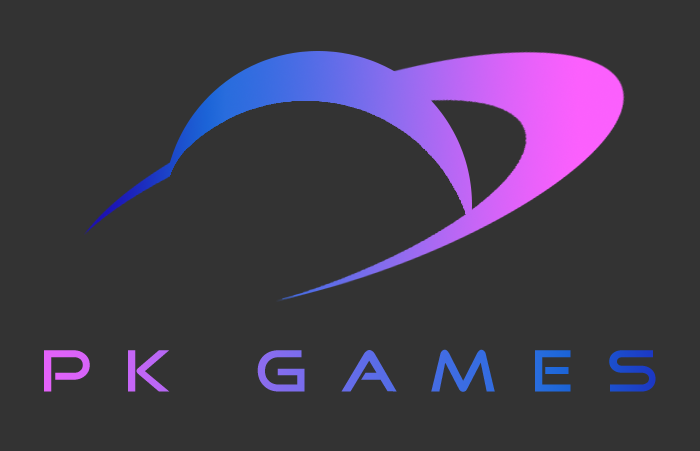
<style>
.page{position:relative;width:700px;height:451px;background:#333333}
.page>*{position:absolute;margin:0}
.t1{font:60px "GoodTimes";letter-spacing:0.55em}
</style>
<div class="page">
<p class="t1" style="left:44px;top:349px;width:612px;height:43px">PK GAMES</p>
</div>
